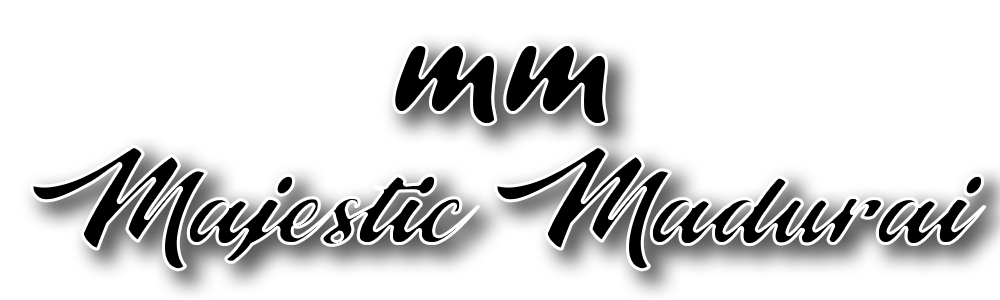
<style>
.page{position:relative;width:1000px;height:300px;background:#ffffff}
.page>*{position:absolute;margin:0}
.t1{font:152.1px "ForteMT";color:#000000;scale:0.95 1}
.t2{font:108.3px "Majestic";scale:1.08 1}
</style>
<div class="page">
<p class="t1" style="left:392px;top:43px;width:217px;height:83px">mm</p>
<p class="t2" style="left:30px;top:145px;width:957px;height:127px">Majestic Madurai</p>
</div>
